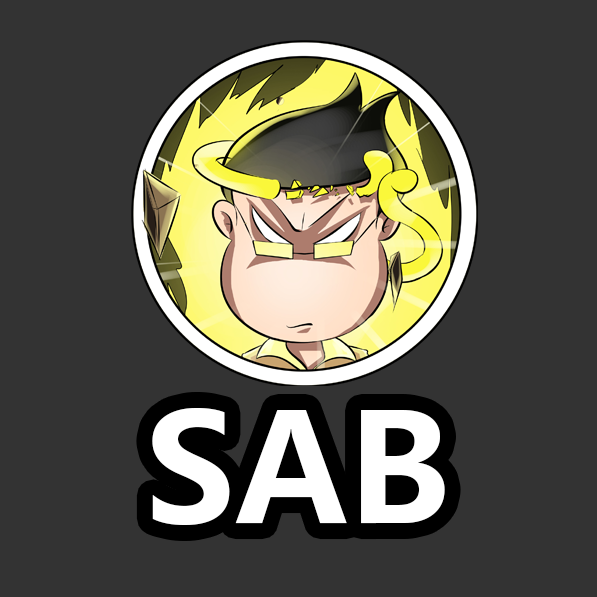
<style>
.page{position:relative;width:597px;height:597px;background:#333333}
.page>*{position:absolute;margin:0}
.t1{font:149.8px "MicrosoftYaHei-Bold";color:#ffffff}
</style>
<div class="page">
<p class="t1" style="left:152px;top:408px;width:293px;height:117px">SAB</p>
</div>
